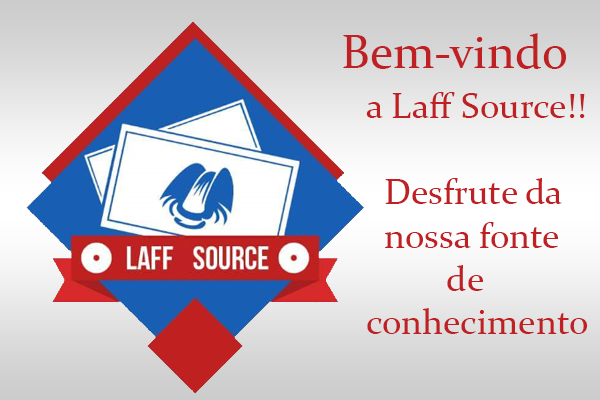
<style>
.page{position:relative;width:600px;height:400px}
.page>*{position:absolute;margin:0}
.t1{font:48px "Constantia";color:#bf2024}
.t2{font:36px "Constantia";color:#bf2024}
</style>
<div class="page">
<p class="t1" style="left:343px;top:33px;width:223px;height:36px">Bem-vindo</p>
<p class="t2" style="left:366px;top:92px;width:221px;height:242px">a Laff Source!!<br><br>  Desfrute da<br>  nossa fonte<br>         de<br>conhecimento</p>
</div>
